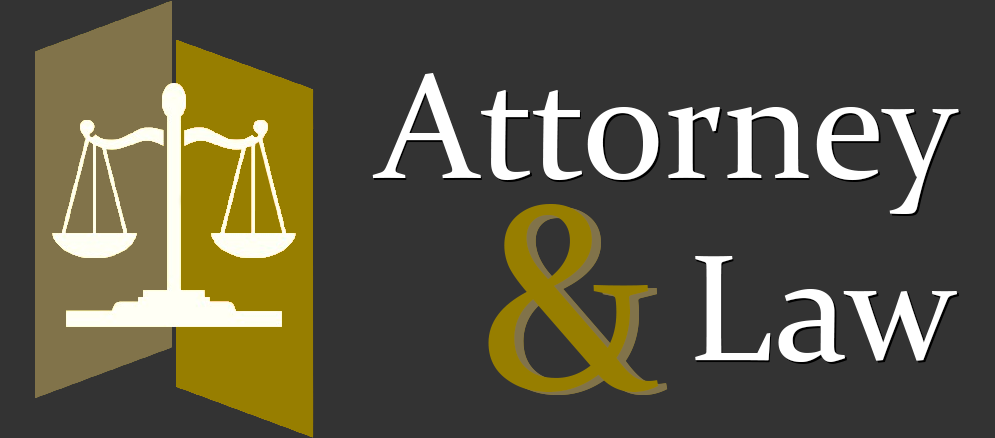
<style>
.page{position:relative;width:995px;height:438px;background:#333333}
.page>*{position:absolute;margin:0}
.t1{font:152px "Constantia";color:#ffffff}
.t2{font:270px "Constantia";color:#977e00}
.t3{font:270px "Constantia"}
</style>
<div class="page">
<p class="t1" style="left:372px;top:73px;width:587px;height:289px;text-align:right">Attorney<br>Law</p>
<p class="t2" style="left:488px;top:204px;width:171px;height:188px">&amp;</p>
<p class="t3" style="left:497px;top:207px;width:171px;height:188px">&amp;</p>
</div>
